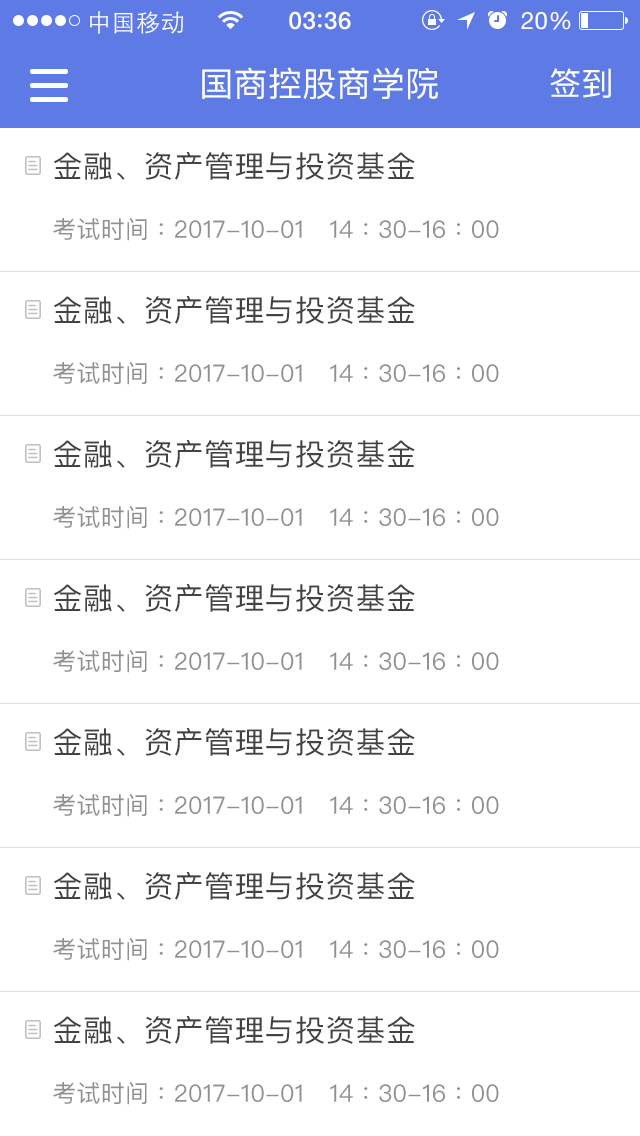
<style>
.page{position:relative;width:640px;height:1136px;background:#ffffff}
.page>*{position:absolute;margin:0}
.t1{font:24px "STHeitiSC-Light";letter-spacing:0.02em;color:#ffffff}
.t2{font:24px "HelveticaNeue-Medium";letter-spacing:0.03em;color:#ffffff}
.t3{font:24px "HelveticaNeue";letter-spacing:0.02em;color:#ffffff}
.t4{font:34px "PingFangSC-Regular";letter-spacing:0.01em;color:#ffffff}
.t5{font:32px "PingFangSC-Regular";letter-spacing:0.01em;color:#ffffff}
.t6{font:30px "PingFangSC-Regular";letter-spacing:0.01em;color:#434343}
.t7{font:24px "PingFangSC-Regular";letter-spacing:0.01em;color:#919191}
</style>
<div class="page">
<p class="t1" style="left:90px;top:11px;width:93px;height:23px">中国移动</p>
<p class="t2" style="left:289px;top:11px;width:62px;height:19px">03 36</p>
<p class="t3" style="left:521px;top:11px;width:50px;height:19px">20%</p>
<p class="t4" style="left:202px;top:67px;width:236px;height:33px">国商控股商学院</p>
<p class="t5" style="left:550px;top:68px;width:61px;height:30px">签到</p>
<p class="t6" style="left:54px;top:151px;width:361px;height:29px">金融、资产管理与投资基金</p>
<p class="t7" style="left:53px;top:218px;width:446px;height:23px">考试时间：2017-10-01   14：30-16：00</p>
<p class="t6" style="left:54px;top:295px;width:361px;height:29px">金融、资产管理与投资基金</p>
<p class="t7" style="left:53px;top:362px;width:446px;height:23px">考试时间：2017-10-01   14：30-16：00</p>
<p class="t6" style="left:54px;top:439px;width:361px;height:29px">金融、资产管理与投资基金</p>
<p class="t7" style="left:53px;top:506px;width:446px;height:23px">考试时间：2017-10-01   14：30-16：00</p>
<p class="t6" style="left:54px;top:583px;width:361px;height:29px">金融、资产管理与投资基金</p>
<p class="t7" style="left:53px;top:650px;width:446px;height:23px">考试时间：2017-10-01   14：30-16：00</p>
<p class="t6" style="left:54px;top:727px;width:361px;height:29px">金融、资产管理与投资基金</p>
<p class="t7" style="left:53px;top:794px;width:446px;height:23px">考试时间：2017-10-01   14：30-16：00</p>
<p class="t6" style="left:54px;top:871px;width:361px;height:29px">金融、资产管理与投资基金</p>
<p class="t7" style="left:53px;top:938px;width:446px;height:23px">考试时间：2017-10-01   14：30-16：00</p>
<p class="t6" style="left:54px;top:1015px;width:361px;height:29px">金融、资产管理与投资基金</p>
<p class="t7" style="left:53px;top:1082px;width:446px;height:23px">考试时间：2017-10-01   14：30-16：00</p>
</div>
